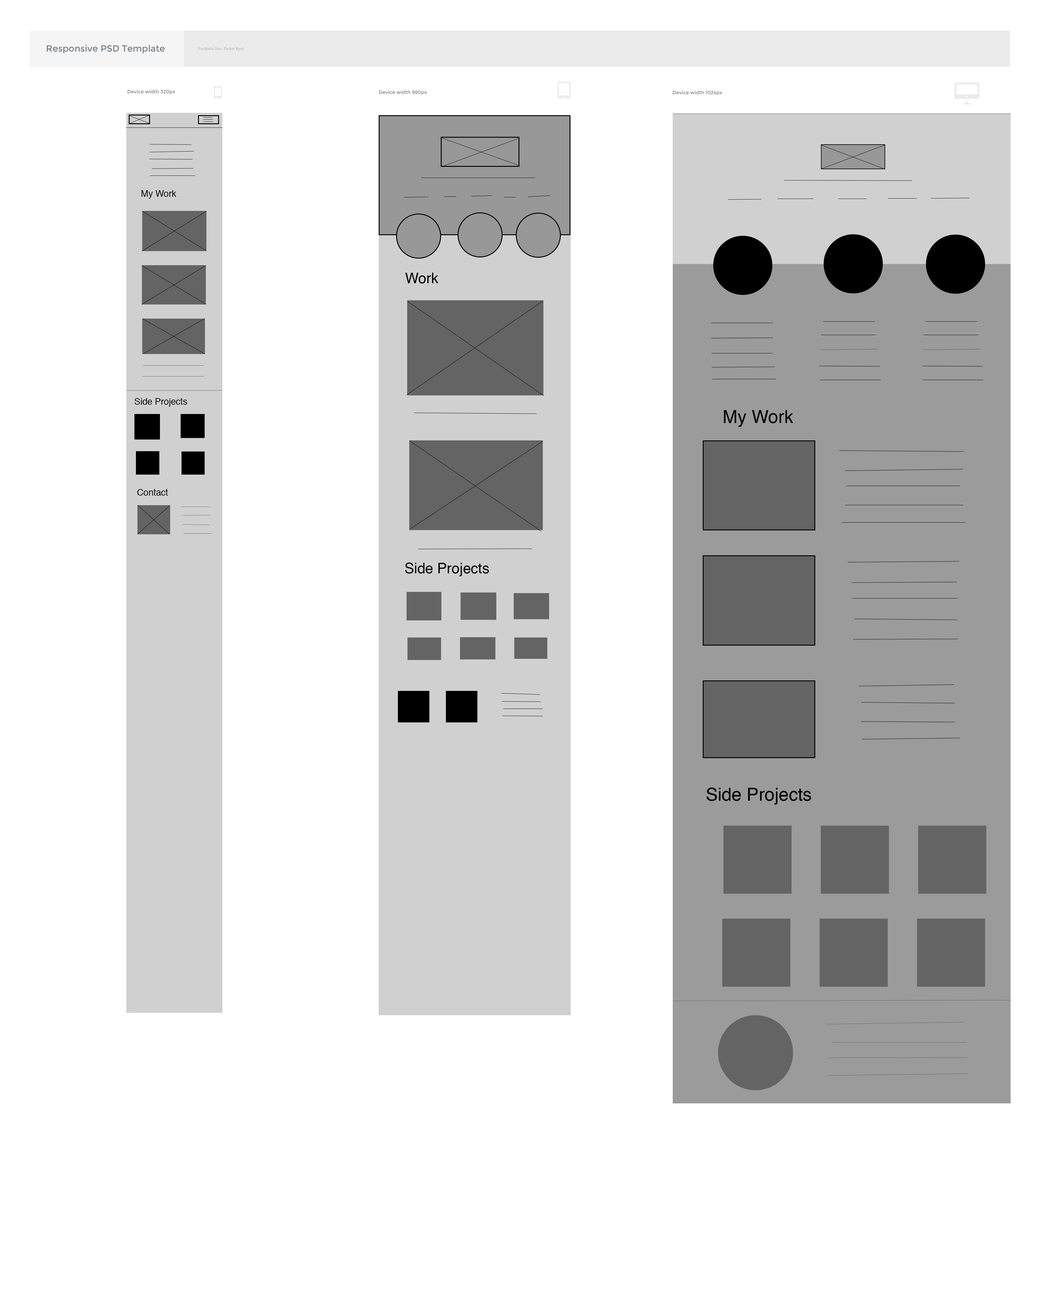
<style>
.page{position:relative;width:1040px;height:1290px;background:#ffffff}
.page>*{position:absolute;margin:0}
.t1{font:9px "Montserrat-Regular";color:#787f84}
.t2{font:4.2px "MyriadPro-Regular";color:#afb4b8}
.t3{font:4.8px "Montserrat-Regular";color:#878787}
.t4{font:9px "Helvetica";color:#000000}
.t5{font:14.4px "Helvetica";color:#000000}
.t6{font:18px "Helvetica";color:#000000}
</style>
<div class="page">
<p class="t1" style="left:47px;top:45px;width:118px;height:8px">Responsive PSD Template</p>
<p class="t2" style="left:199px;top:47px;width:45px;height:4px">Portfolio Site - Parker Byrd</p>
<p class="t3" style="left:128px;top:89px;width:47px;height:5px">Device width 320px</p>
<p class="t3" style="left:379px;top:90px;width:48px;height:5px">Device width 980px</p>
<p class="t3" style="left:673px;top:90px;width:49px;height:5px">Device width 1024px</p>
<p class="t4" style="left:141px;top:190px;width:35px;height:9px">My Work</p>
<p class="t5" style="left:405px;top:273px;width:33px;height:11px">Work</p>
<p class="t4" style="left:135px;top:398px;width:52px;height:8px">Side Projects</p>
<p class="t6" style="left:724px;top:410px;width:69px;height:17px">My Work</p>
<p class="t4" style="left:137px;top:489px;width:31px;height:7px">Contact</p>
<p class="t5" style="left:405px;top:562px;width:84px;height:14px">Side Projects</p>
<p class="t6" style="left:706px;top:788px;width:105px;height:17px">Side Projects</p>
</div>
